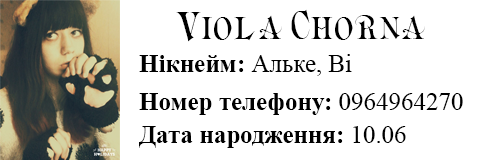
<style>
.page{position:relative;width:480px;height:160px;background:#ffffff}
.page>*{position:absolute;margin:0}
.t1{font:33.3px "Briolin";color:#000000}
.t2{font:25px "TimesNewRomanPSMT";color:#000000}
.t3{font:25px "TimesNewRomanPS-BoldMT";color:#000000}
</style>
<div class="page">
<p class="t1" style="left:176px;top:9px;width:249px;height:33px">Viola Chorna</p>
<p class="t2" style="left:139px;top:54px;width:213px;height:22px"><span class="t3">Нікнейм: </span>Альке, Ві</p>
<p class="t3" style="left:139px;top:93px;width:324px;height:22px">Номер телефону:<span class="t2"> 0964964270</span></p>
<p class="t3" style="left:139px;top:126px;width:267px;height:22px">Дата народження: <span class="t2">10.06</span></p>
</div>
